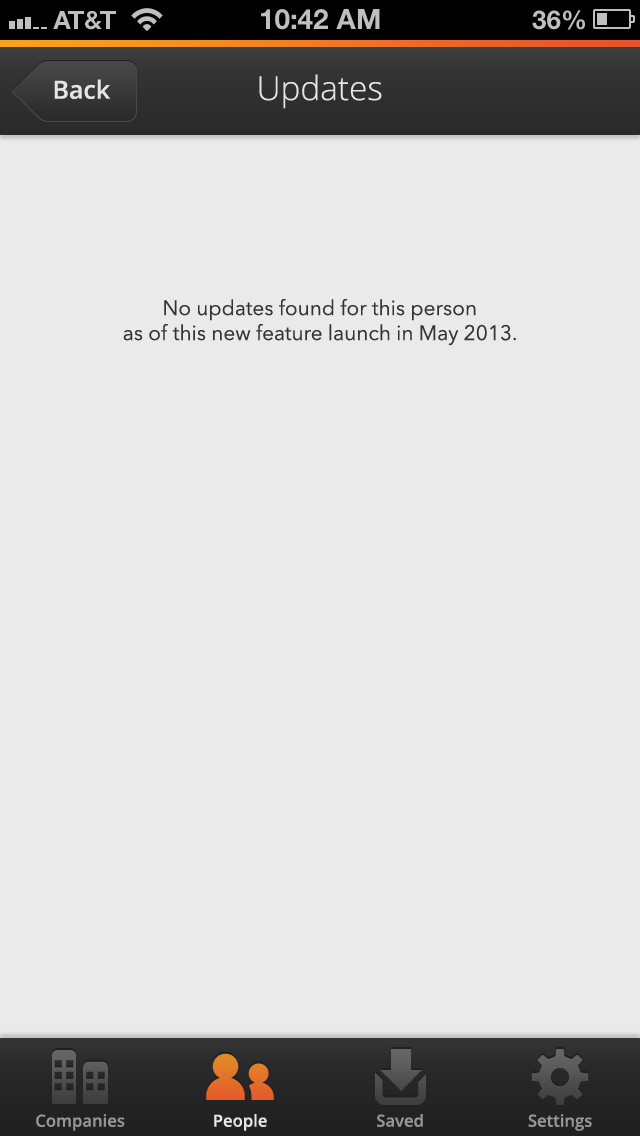
<style>
.page{position:relative;width:640px;height:1136px;background:#eaeaea}
.page>*{position:absolute;margin:0}
.t1{font:33.3px "OpenSans-Light";color:#e5e5e5}
.t2{font:25px "OpenSans-Semibold";color:#e5e5e5}
.t3{font:20.8px "AvenirNext-Regular";color:#343434}
.t4{font:16.7px "OpenSans-Semibold";color:#969696}
.t5{font:16.7px "OpenSans-Semibold";color:#e5e5e5}
</style>
<div class="page">
<p class="t1" style="left:259px;top:74px;width:123px;height:35px">Updates</p>
<p class="t2" style="left:54px;top:79px;width:57px;height:20px">Back</p>
<p class="t3" style="left:123px;top:299px;width:393px;height:47px;text-align:center">No updates found for this person <br>as of this new feature launch in May 2013.</p>
<p class="t4" style="left:36px;top:1114px;width:89px;height:17px">Companies</p>
<p class="t5" style="left:214px;top:1114px;width:53px;height:17px">People</p>
<p class="t4" style="left:377px;top:1114px;width:46px;height:13px">Saved</p>
<p class="t4" style="left:528px;top:1114px;width:64px;height:17px">Settings</p>
</div>
